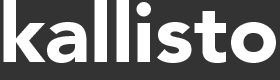
<style>
.page{position:relative;width:280px;height:80px;background:#333333}
.page>*{position:absolute;margin:0}
.t1{font:83.3px "Avenir-Black";color:#ffffff}
</style>
<div class="page">
<p class="t1" style="left:3px;top:0px;width:273px;height:63px">kallisto</p>
</div>
